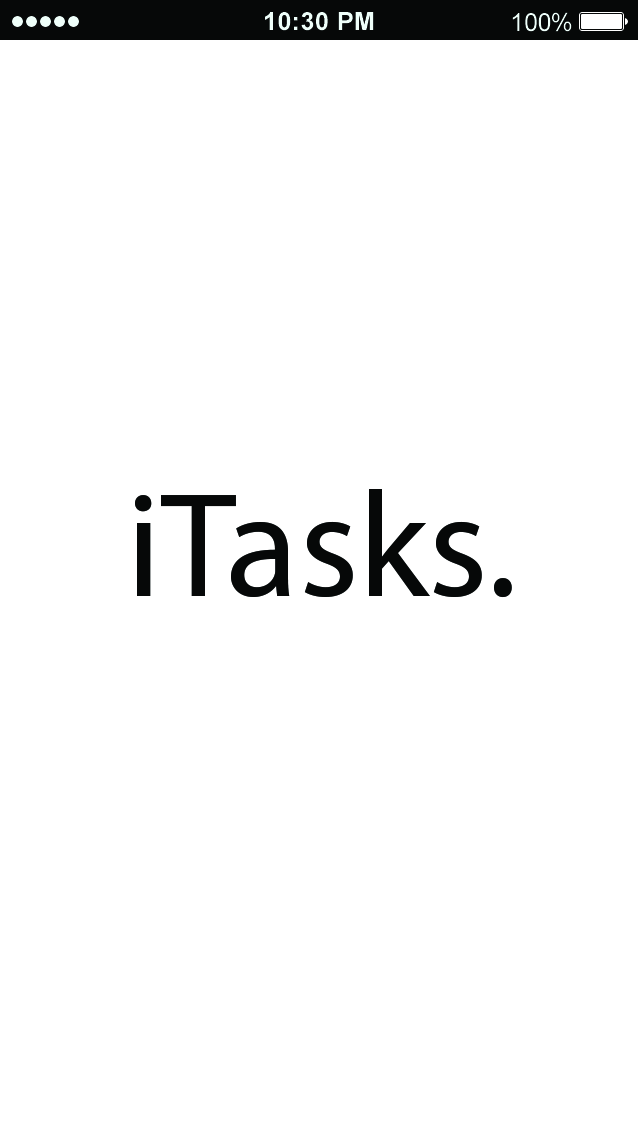
<style>
.page{position:relative;width:640px;height:1136px;background:#ffffff}
.page>*{position:absolute;margin:0}
.t1{font:25px "Arial-BoldMT";letter-spacing:0.02em;color:#effffa}
.t2{font:25px "ArialMT";color:#effffa}
.t3{font:150px "MyriadPro-Regular";color:#060808}
</style>
<div class="page">
<p class="t1" style="left:265px;top:12px;width:109px;height:19px">10:30 PM</p>
<p class="t2" style="left:512px;top:12px;width:60px;height:20px">100%</p>
<p class="t3" style="left:135px;top:489px;width:377px;height:109px">iTasks.</p>
</div>
